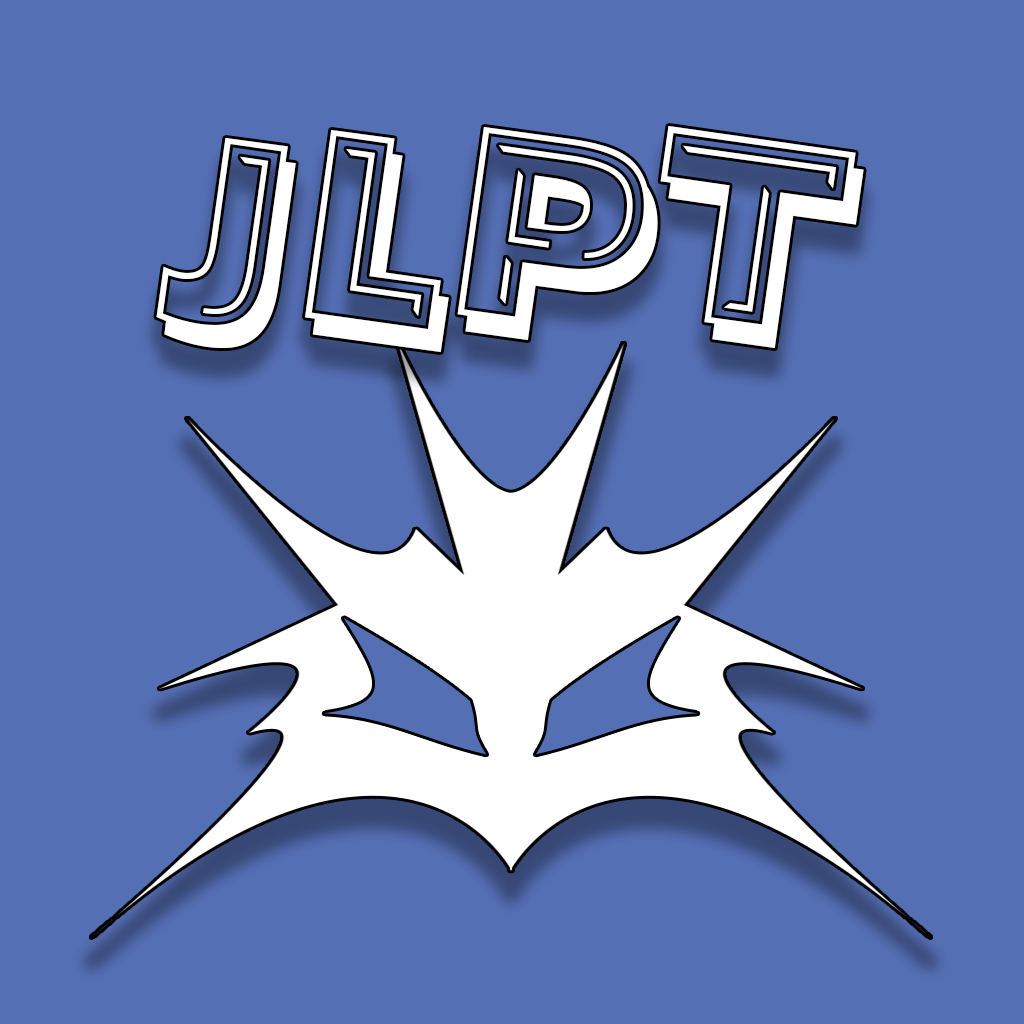
<style>
.page{position:relative;width:1024px;height:1024px;background:#556fb5}
.page>*{position:absolute;margin:0}
.t1{font:272.3px "AlphabetSoupBT-Tilt";color:#ffffff}
</style>
<div class="page">
<p class="t1" style="left:156px;top:126px;width:708px;height:226px">JLPT</p>
</div>
